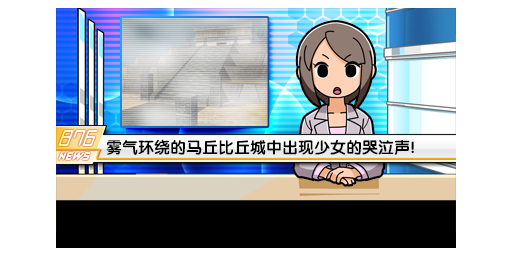
<style>
.page{position:relative;width:512px;height:256px;background:#ffffff}
.page>*{position:absolute;margin:0}
.t1{font:16px "FZY4K--GBK1-0";color:#000000}
</style>
<div class="page">
<p class="t1" style="left:106px;top:139px;width:308px;height:16px">雾气环绕的马丘比丘城中出现少女的哭泣声!</p>
</div>
